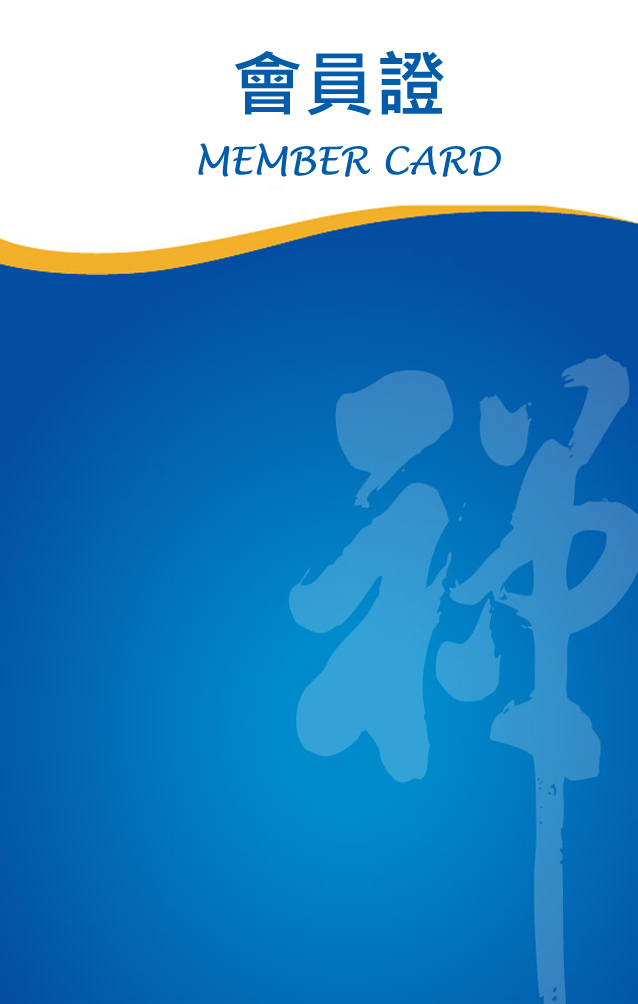
<style>
.page{position:relative;width:638px;height:1004px;background:#ffffff}
.page>*{position:absolute;margin:0}
.t1{font:72px "MicrosoftJhengHeiBold";color:#025caa}
.t2{font:37.5px "LucidaHandwriting-Italic";color:#025caa}
</style>
<div class="page">
<p class="t1" style="left:235px;top:50px;width:209px;height:66px">會員證</p>
<p class="t2" style="left:198px;top:143px;width:303px;height:34px">MEMBER CARD</p>
</div>
